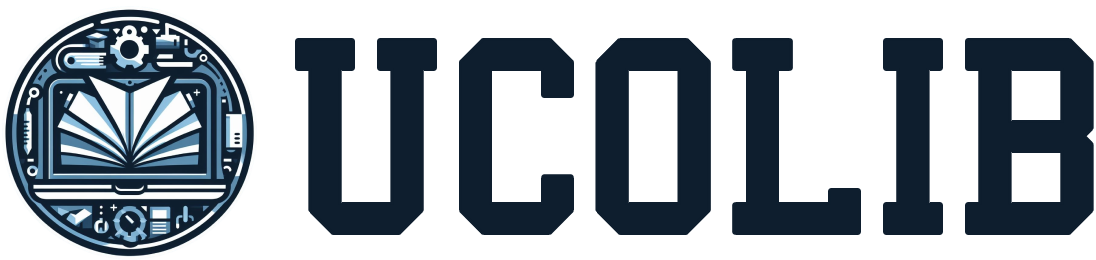
<style>
.page{position:relative;width:1096px;height:260px;background:#ffffff}
.page>*{position:absolute;margin:0}
.t1{font:280px "College";color:#0e1e2e}
</style>
<div class="page">
<p class="t1" style="left:297px;top:40px;width:794px;height:192px">UCOLIB</p>
</div>
